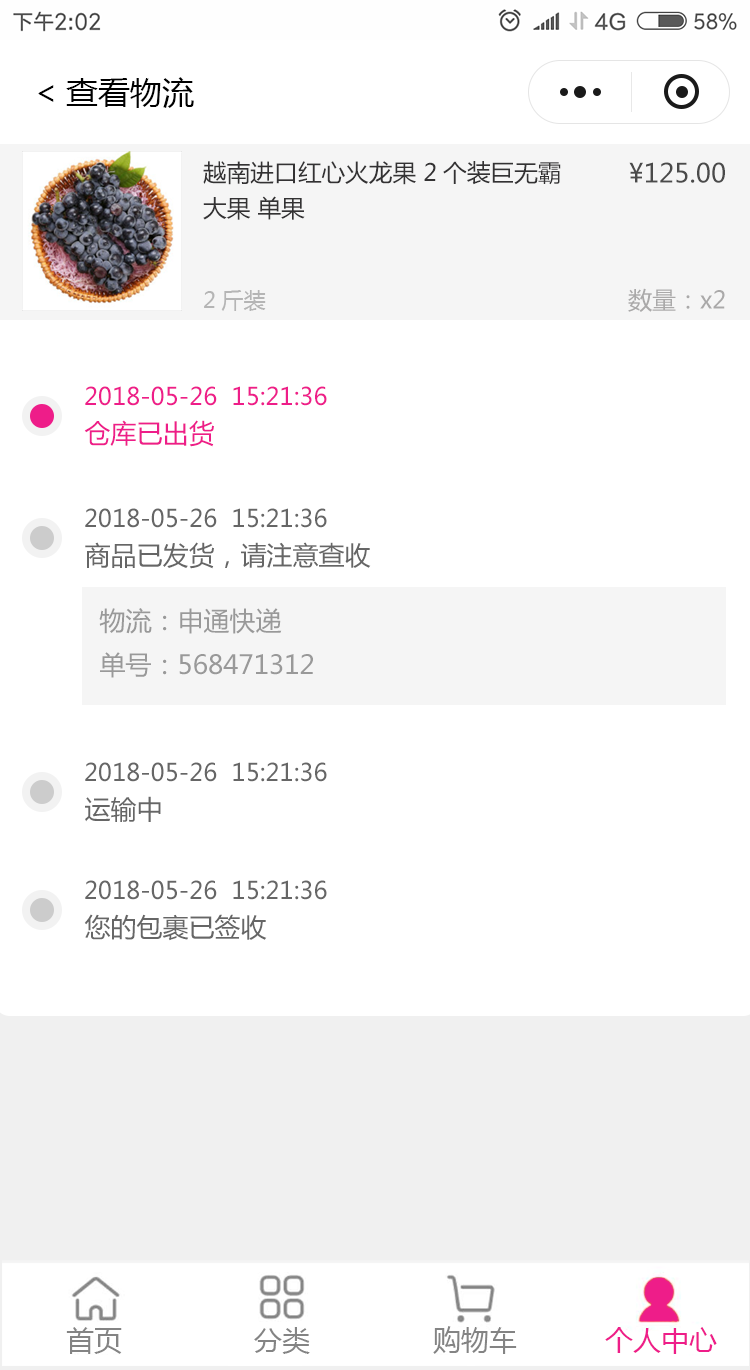
<style>
.page{position:relative;width:750px;height:1370px;background:#ffffff}
.page>*{position:absolute;margin:0}
.t1{font:32px "MicrosoftYaHei";color:#000000}
.t2{font:23.7px/35.5px "MicrosoftYaHei";color:#333233}
.t3{font:26px "MicrosoftYaHei";color:#4a4a4a}
.t4{font:22px "MicrosoftYaHei";color:#b5b5b5}
.t5{font:24px "MicrosoftYaHei";color:#aaa9a9}
.t6{font:24px "MicrosoftYaHei";color:#ee1d89}
.t7{font:26px "MicrosoftYaHei";color:#ee1d89}
.t8{font:24px "MicrosoftYaHei";color:#666666}
.t9{font:26px "MicrosoftYaHei";color:#666666}
.t10{font:26px/44px "MicrosoftYaHei";color:#999999}
</style>
<div class="page">
<p class="t1" style="left:38px;top:77px;width:156px;height:31px">&lt;查看物流</p>
<p class="t2" style="left:203px;top:161px;width:358px;height:59px">越南进口红心火龙果 2个装巨无霸大果 单果</p>
<p class="t3" style="left:629px;top:162px;width:96px;height:21px">¥125.00</p>
<p class="t4" style="left:204px;top:290px;width:62px;height:21px">2斤装</p>
<p class="t5" style="left:628px;top:288px;width:97px;height:24px">数量：x2</p>
<p class="t6" style="left:85px;top:386px;width:242px;height:20px">2018-05-26  15:21:36</p>
<p class="t7" style="left:84px;top:420px;width:130px;height:27px">仓库已出货</p>
<p class="t8" style="left:85px;top:508px;width:242px;height:20px">2018-05-26  15:21:36</p>
<p class="t9" style="left:85px;top:542px;width:286px;height:27px">商品已发货，请注意查收</p>
<p class="t10" style="left:99px;top:608px;width:214px;height:70px">物流：申通快递<br>单号：568471312</p>
<p class="t8" style="left:85px;top:762px;width:242px;height:20px">2018-05-26  15:21:36</p>
<p class="t9" style="left:85px;top:796px;width:76px;height:26px">运输中</p>
<p class="t8" style="left:85px;top:880px;width:242px;height:20px">2018-05-26  15:21:36</p>
<p class="t9" style="left:84px;top:914px;width:183px;height:27px">您的包裹已签收</p>
</div>
